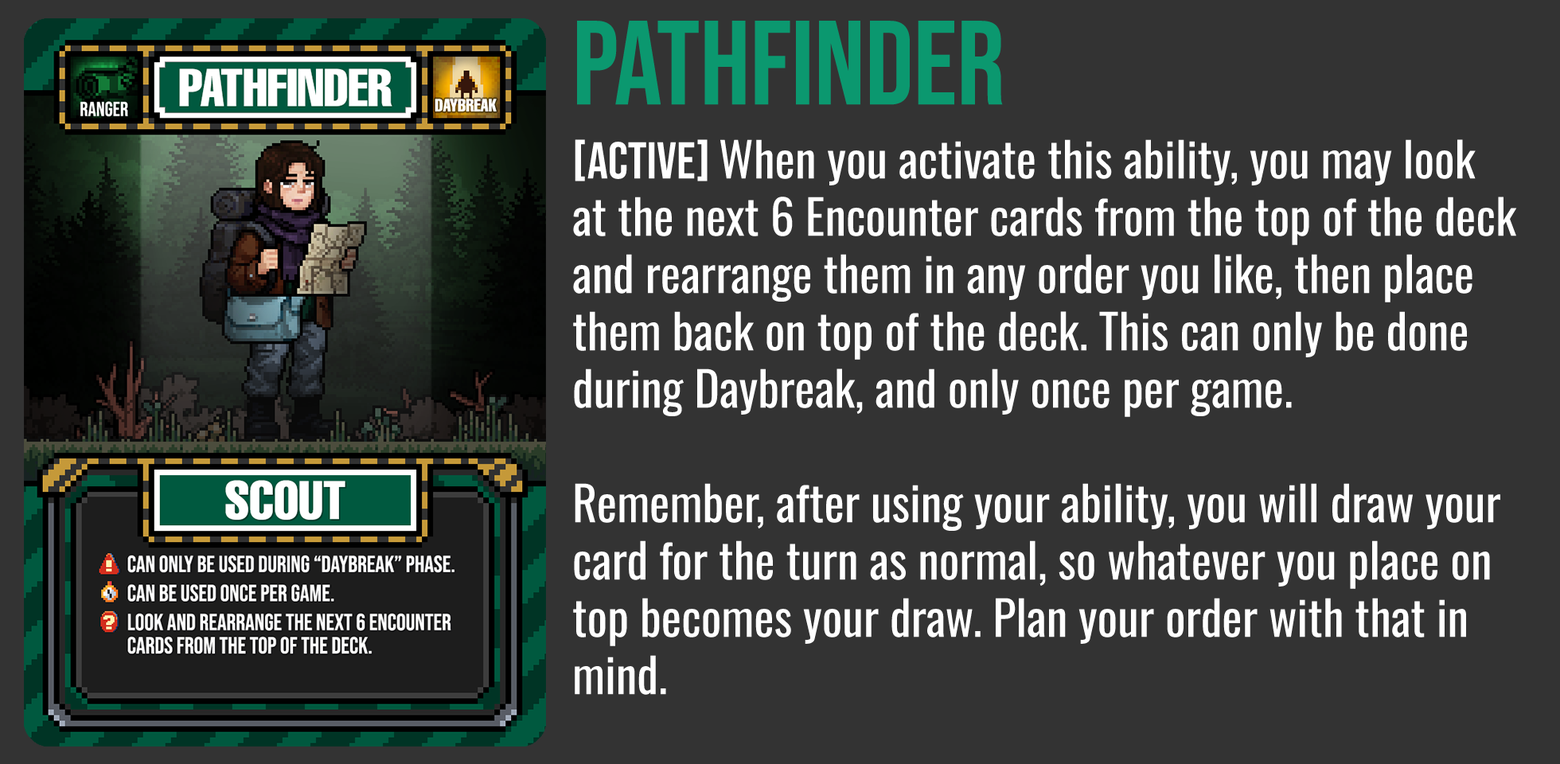
<style>
.page{position:relative;width:1560px;height:764px;background:#333333}
.page>*{position:absolute;margin:0}
.t1{font:119.4px "BebasNeue-Regular";color:#0b986f}
.t2{font:47.8px "Oswald-Regular";color:#ffffff}
.t3{font:51.7px "BebasNeue-Regular";color:#ffffff}
</style>
<div class="page">
<p class="t1" style="left:577px;top:21px;width:426px;height:84px">PATHFINDER</p>
<p class="t2" style="left:573px;top:139px;width:944px;height:556px"><span class="t3">[aCTIVE] </span>When you activate this ability, you may look at the next 6 Encounter cards from the top of the deck and rearrange them in any order you like, then place them back on top of the deck. This can only be done during Daybreak, and only once per game.<br><br>Remember, after using your ability, you will draw your card for the turn as normal, so whatever you place on top becomes your draw. Plan your order with that in mind.</p>
</div>
